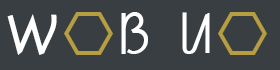
<style>
.page{position:relative;width:280px;height:70px;background:#393e42}
.page>*{position:absolute;margin:0}
.t1{font:72px "H2porL";color:#ffffff}
.t2{font:57px "H2porL";color:#ffffff}
</style>
<div class="page">
<p class="t1" style="left:7px;top:14px;width:50px;height:41px">w</p>
<p class="t2" style="left:121px;top:12px;width:27px;height:42px">B</p>
<p class="t2" style="left:182px;top:12px;width:28px;height:42px">U</p>
</div>
